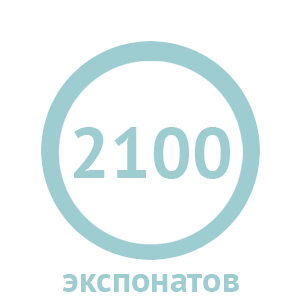
<style>
.page{position:relative;width:300px;height:300px;background:#ffffff}
.page>*{position:absolute;margin:0}
.t1{font:72px "PTSans-Bold";color:#9ecdd1}
.t2{font:36px "PTSans-Bold";color:#9ecdd1}
</style>
<div class="page">
<p class="t1" style="left:74px;top:127px;width:156px;height:52px">2100</p>
<p class="t2" style="left:62px;top:274px;width:177px;height:18px">экспонатов</p>
</div>
